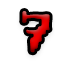
<style>
.page{position:relative;width:71px;height:71px;background:#ffffff}
.page>*{position:absolute;margin:0}
.t1{font:55px "Tipi-Organic"}
</style>
<div class="page">
<p class="t1" style="left:22px;top:11px;width:28px;height:42px">7</p>
</div>
